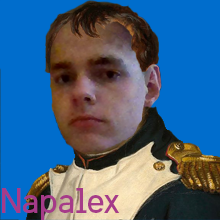
<style>
.page{position:relative;width:220px;height:220px;background:#006dcc}
.page>*{position:absolute;margin:0}
.t1{font:34.3px "SwedenSans";color:#a63b89}
</style>
<div class="page">
<p class="t1" style="left:2px;top:188px;width:118px;height:32px">Napalex</p>
</div>
